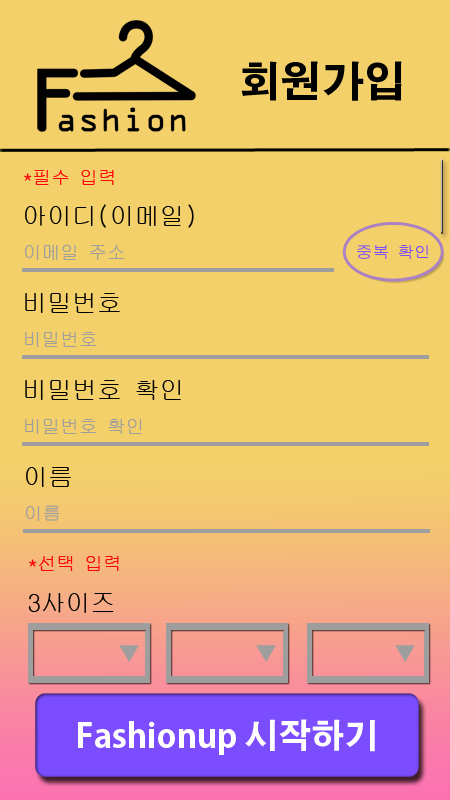
<style>
.page{position:relative;width:450px;height:800px;background:#f3d06a}
.page>*{position:absolute;margin:0}
.t1{font:41.7px "AdobeGothicStd-Bold";color:#010100}
.t2{font:18.8px "GulimChe";color:#ff0309}
.t3{font:25px "GulimChe";color:#010100}
.t4{font:18.8px "GulimChe";color:#9e9e9e}
.t5{font:16.7px "GulimChe";color:#7c4dff}
.t6{font:33.3px "AdobeGothicStd-Bold";color:#fefefe}
</style>
<div class="page">
<p class="t1" style="left:241px;top:61px;width:161px;height:40px">회원가입</p>
<p class="t2" style="left:24px;top:170px;width:90px;height:15px">*필수 입력</p>
<p class="t3" style="left:25px;top:204px;width:169px;height:24px">아이디(이메일)</p>
<p class="t4" style="left:25px;top:245px;width:100px;height:15px">이메일 주소</p>
<p class="t5" style="left:357px;top:245px;width:72px;height:14px">중복 확인</p>
<p class="t3" style="left:25px;top:293px;width:95px;height:20px">비밀번호</p>
<p class="t4" style="left:25px;top:332px;width:72px;height:15px">비밀번호</p>
<p class="t3" style="left:25px;top:380px;width:156px;height:20px">비밀번호 확인</p>
<p class="t4" style="left:25px;top:419px;width:117px;height:15px">비밀번호 확인</p>
<p class="t3" style="left:26px;top:467px;width:45px;height:20px">이름</p>
<p class="t4" style="left:26px;top:505px;width:34px;height:16px">이름</p>
<p class="t2" style="left:29px;top:556px;width:90px;height:15px">*선택 입력</p>
<p class="t3" style="left:28px;top:593px;width:86px;height:20px">3사이즈</p>
<p class="t6" style="left:78px;top:719px;width:298px;height:36px">Fashionup 시작하기</p>
</div>
